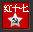
<style>
.page{position:relative;width:33px;height:32px;background:#c50000}
.page>*{position:absolute;margin:0}
.t1{font:10.4px "SimSun";letter-spacing:-0.25em;color:#ffffff}
</style>
<div class="page">
<p class="t1" style="left:4px;top:4px;width:25px;height:8px">红十七</p>
</div>
